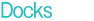
<style>
.page{position:relative;width:94px;height:21px;background:#ffffff}
.page>*{position:absolute;margin:0}
.t1{font:20px "GothicMB101Pro-Regular";letter-spacing:-0.06em;color:#1dbcc0;scale:0.9 1}
</style>
<div class="page">
<p class="t1" style="left:1px;top:2px;width:51px;height:16px">Docks</p>
</div>
